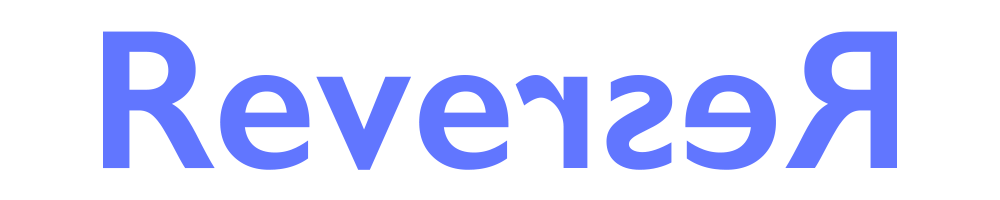
<style>
.page{position:relative;width:1000px;height:200px;background:#ffffff}
.page>*{position:absolute;margin:0}
.t1{font:200px "GillSans-SemiBold";color:#6176ff}
</style>
<div class="page">
<p class="t1" style="left:103px;top:31px;width:406px;height:139px">Reve</p>
<p class="t1" style="left:785px;top:31px;width:112px;height:137px;rotate:180deg">R</p>
<p class="t1" style="left:515px;top:75px;width:73px;height:93px;rotate:180deg">r</p>
<p class="t1" style="left:606px;top:75px;width:67px;height:95px;rotate:180deg">s</p>
<p class="t1" style="left:685px;top:75px;width:91px;height:95px;rotate:180deg">e</p>
</div>
